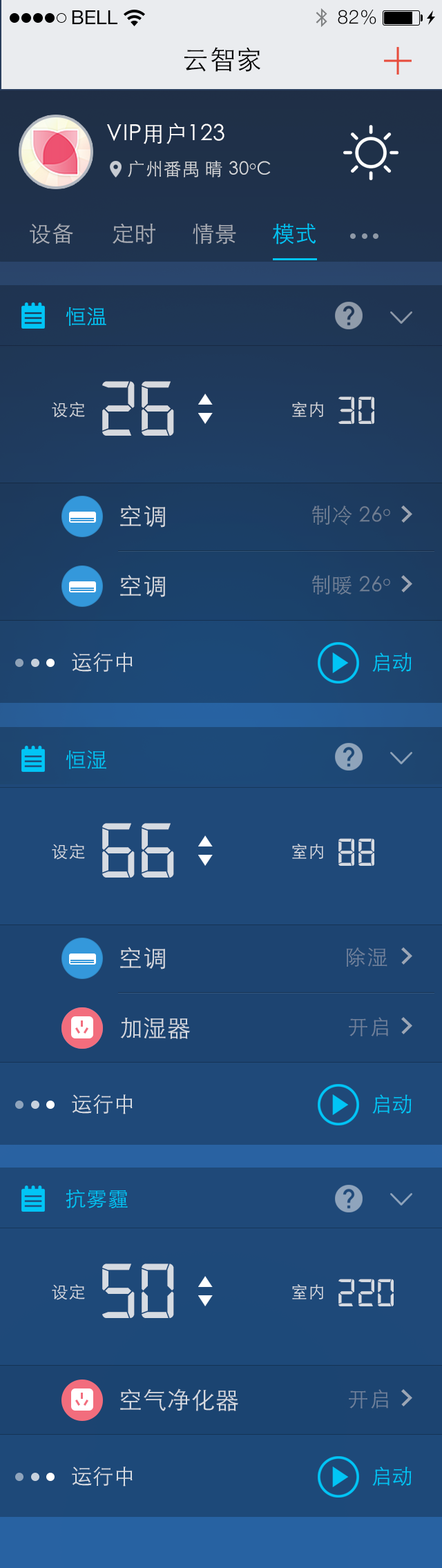
<style>
.page{position:relative;width:442px;height:1568px;background:#1f4979}
.page>*{position:absolute;margin:0}
.t1{font:19.3px "HelveticaNeue";color:#000000;text-transform:uppercase}
.t2{font:19.3px "HelveticaNeue-Light";letter-spacing:0.025em;color:#000000}
.t3{font:26.2px "STHeitiSC-Light";letter-spacing:0.025em;color:#000000}
.t4{font:22.1px "STHeitiSC-Light";letter-spacing:0.025em;color:#fffefe}
.t5{font:18px "STHeitiSC-Light";letter-spacing:0.025em;color:#d6d8db}
.t6{font:22.1px "STHeitiSC-Light";letter-spacing:0.025em;color:#a9adb5}
.t7{font:22.1px "STHeitiSC-Light";letter-spacing:0.025em;color:#01c5f6}
.t8{font:20.7px "STHeitiSC-Light";letter-spacing:0.025em;color:#01c5f6}
.t9{font:82.9px "Digital-7Mono";letter-spacing:0.025em;color:#d6d9de}
.t10{font:16.6px "STHeitiSC-Light";letter-spacing:0.025em;color:#d6d9de}
.t11{font:41.4px "Digital-7Mono";letter-spacing:0.025em;color:#d6d9de}
.t12{font:23.5px "STHeitiSC-Light";letter-spacing:0.025em;color:#d6d9df}
.t13{font:20.7px "STHeitiSC-Light";letter-spacing:0.025em;color:#707e93}
.t14{font:23.5px "STHeitiSC-Light";letter-spacing:0.025em;color:#d6dae0}
.t15{font:20.7px "STHeitiSC-Light";letter-spacing:0.025em;color:#708096}
.t16{font:20.7px "STHeitiSC-Light";letter-spacing:0.025em;color:#d6dbe2}
.t17{font:82.9px "Digital-7Mono";letter-spacing:0.025em;color:#d6dbe2}
.t18{font:16.6px "STHeitiSC-Light";letter-spacing:0.025em;color:#d6dbe2}
.t19{font:41.4px "Digital-7Mono";letter-spacing:0.025em;color:#d6dbe2}
.t20{font:23.5px "STHeitiSC-Light";letter-spacing:0.025em;color:#d6dae1}
.t21{font:20.7px "STHeitiSC-Light";letter-spacing:0.025em;color:#71829c}
.t22{font:20.7px "STHeitiSC-Light";letter-spacing:0.025em;color:#70829c}
</style>
<div class="page">
<p class="t1" style="left:72px;top:10px;width:45px;height:14px">Bell</p>
<p class="t2" style="left:338px;top:10px;width:38px;height:15px">82%</p>
<p class="t3" style="left:184px;top:47px;width:77px;height:25px">云智家</p>
<p class="t4" style="left:107px;top:123px;width:117px;height:21px">VIP用户123</p>
<p class="t5" style="left:128px;top:160px;width:143px;height:17px">广州番禺 晴 30oC</p>
<p class="t6" style="left:30px;top:223px;width:43px;height:21px">设备</p>
<p class="t6" style="left:113px;top:223px;width:42px;height:21px">定时</p>
<p class="t6" style="left:193px;top:224px;width:43px;height:20px">情景</p>
<p class="t7" style="left:272px;top:223px;width:44px;height:21px">模式</p>
<p class="t8" style="left:66px;top:307px;width:40px;height:19px">恒温</p>
<p class="t9" style="left:102px;top:381px;width:72px;height:55px">26</p>
<p class="t10" style="left:52px;top:402px;width:33px;height:16px">设定</p>
<p class="t10" style="left:292px;top:402px;width:31px;height:15px">室内</p>
<p class="t11" style="left:338px;top:396px;width:36px;height:28px">30</p>
<p class="t12" style="left:120px;top:505px;width:45px;height:22px">空调</p>
<p class="t13" style="left:311px;top:505px;width:79px;height:20px">制冷 26o</p>
<p class="t14" style="left:120px;top:574px;width:45px;height:23px">空调</p>
<p class="t15" style="left:311px;top:575px;width:79px;height:20px">制暖 26o</p>
<p class="t16" style="left:72px;top:652px;width:61px;height:20px">运行中</p>
<p class="t8" style="left:372px;top:652px;width:40px;height:20px">启动</p>
<p class="t8" style="left:66px;top:750px;width:40px;height:19px">恒湿</p>
<p class="t17" style="left:102px;top:823px;width:72px;height:55px">66</p>
<p class="t18" style="left:52px;top:844px;width:33px;height:16px">设定</p>
<p class="t18" style="left:292px;top:844px;width:31px;height:15px">室内</p>
<p class="t19" style="left:338px;top:838px;width:36px;height:28px">88</p>
<p class="t20" style="left:120px;top:947px;width:45px;height:22px">空调</p>
<p class="t21" style="left:347px;top:947px;width:40px;height:20px">除湿</p>
<p class="t20" style="left:120px;top:1017px;width:70px;height:22px">加湿器</p>
<p class="t21" style="left:349px;top:1017px;width:39px;height:19px">开启</p>
<p class="t16" style="left:72px;top:1094px;width:61px;height:20px">运行中</p>
<p class="t8" style="left:372px;top:1094px;width:40px;height:20px">启动</p>
<p class="t8" style="left:66px;top:1189px;width:62px;height:19px">抗雾霾</p>
<p class="t17" style="left:102px;top:1264px;width:72px;height:54px">50</p>
<p class="t18" style="left:52px;top:1284px;width:33px;height:16px">设定</p>
<p class="t18" style="left:292px;top:1284px;width:31px;height:15px">室内</p>
<p class="t19" style="left:338px;top:1279px;width:56px;height:27px">220</p>
<p class="t20" style="left:120px;top:1388px;width:118px;height:23px">空气净化器</p>
<p class="t22" style="left:349px;top:1389px;width:39px;height:20px">开启</p>
<p class="t16" style="left:72px;top:1467px;width:61px;height:20px">运行中</p>
<p class="t8" style="left:372px;top:1467px;width:40px;height:19px">启动</p>
</div>
